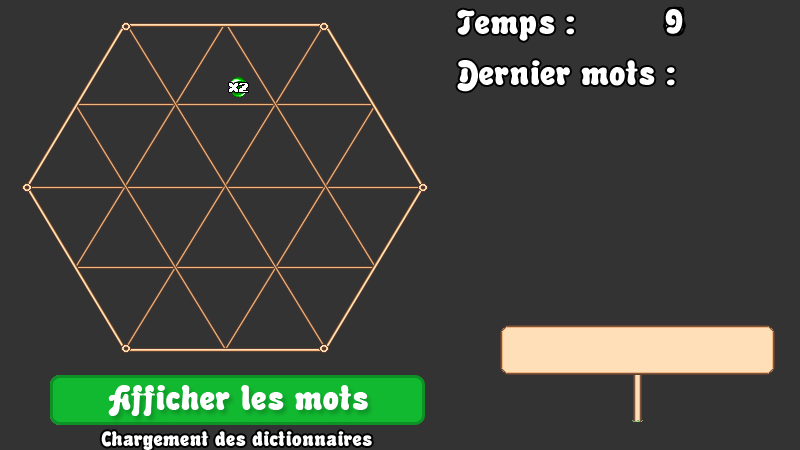
<style>
.page{position:relative;width:800px;height:450px;background:#333333}
.page>*{position:absolute;margin:0}
.t1{font:30px "BubbleSoftRegularSWFTE";color:#ffffff}
.t2{font:10px "Emulogic";color:#ffffff}
.t3{font:18px "BubbleSoftRegularSWFTE";color:#ffffff}
</style>
<div class="page">
<p class="t1" style="left:457px;top:9px;width:117px;height:32px">Temps :</p>
<p class="t1" style="left:665px;top:9px;width:17px;height:26px">0</p>
<p class="t1" style="left:665px;top:9px;width:18px;height:25px">9</p>
<p class="t1" style="left:666px;top:9px;width:17px;height:25px">3</p>
<p class="t1" style="left:666px;top:9px;width:17px;height:25px">5</p>
<p class="t1" style="left:666px;top:8px;width:17px;height:26px">6</p>
<p class="t1" style="left:666px;top:9px;width:17px;height:25px">8</p>
<p class="t1" style="left:667px;top:8px;width:16px;height:26px">2</p>
<p class="t1" style="left:457px;top:60px;width:218px;height:32px">Dernier mots :</p>
<p class="t2" style="left:229px;top:83px;width:19px;height:9px">X2</p>
<p class="t1" style="left:108px;top:385px;width:260px;height:31px">Afficher les mots</p>
<p class="t3" style="left:101px;top:431px;width:271px;height:19px">Chargement des dictionnaires</p>
</div>
